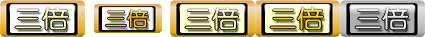
<style>
.page{position:relative;width:425px;height:37px}
.page>*{position:absolute;margin:0}
.t1{font:18.6px "YouYuan";color:#ffc600;font-weight:bold;scale:1.14 1}
.t2{font:23.3px "YouYuan";color:#ffd100;font-weight:bold;scale:1.14 1}
.t3{font:23.3px "YouYuan";color:#eaeaea;font-weight:bold;scale:1.14 1}
</style>
<div class="page">
<p class="t1" style="left:105px;top:9px;width:43px;height:19px">三倍</p>
<p class="t2" style="left:270px;top:7px;width:54px;height:23px">三倍</p>
<p class="t3" style="left:355px;top:7px;width:54px;height:23px">三倍</p>
</div>
